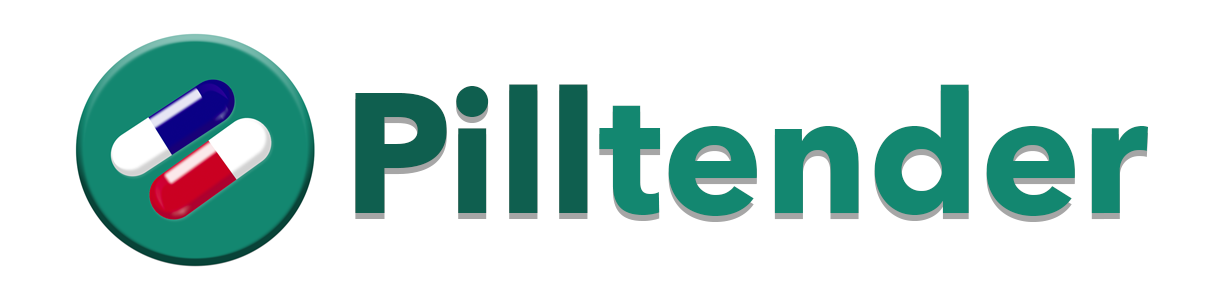
<style>
.page{position:relative;width:1212px;height:300px;background:#ffffff}
.page>*{position:absolute;margin:0}
.t1{font:170px "AvenirNext-Bold";color:#138770}
.t2{font:170px "AvenirNext-Bold";color:#0f5f4f}
</style>
<div class="page">
<p class="t1" style="left:355px;top:84px;width:793px;height:132px"><span class="t2">Pill</span>tender</p>
</div>
